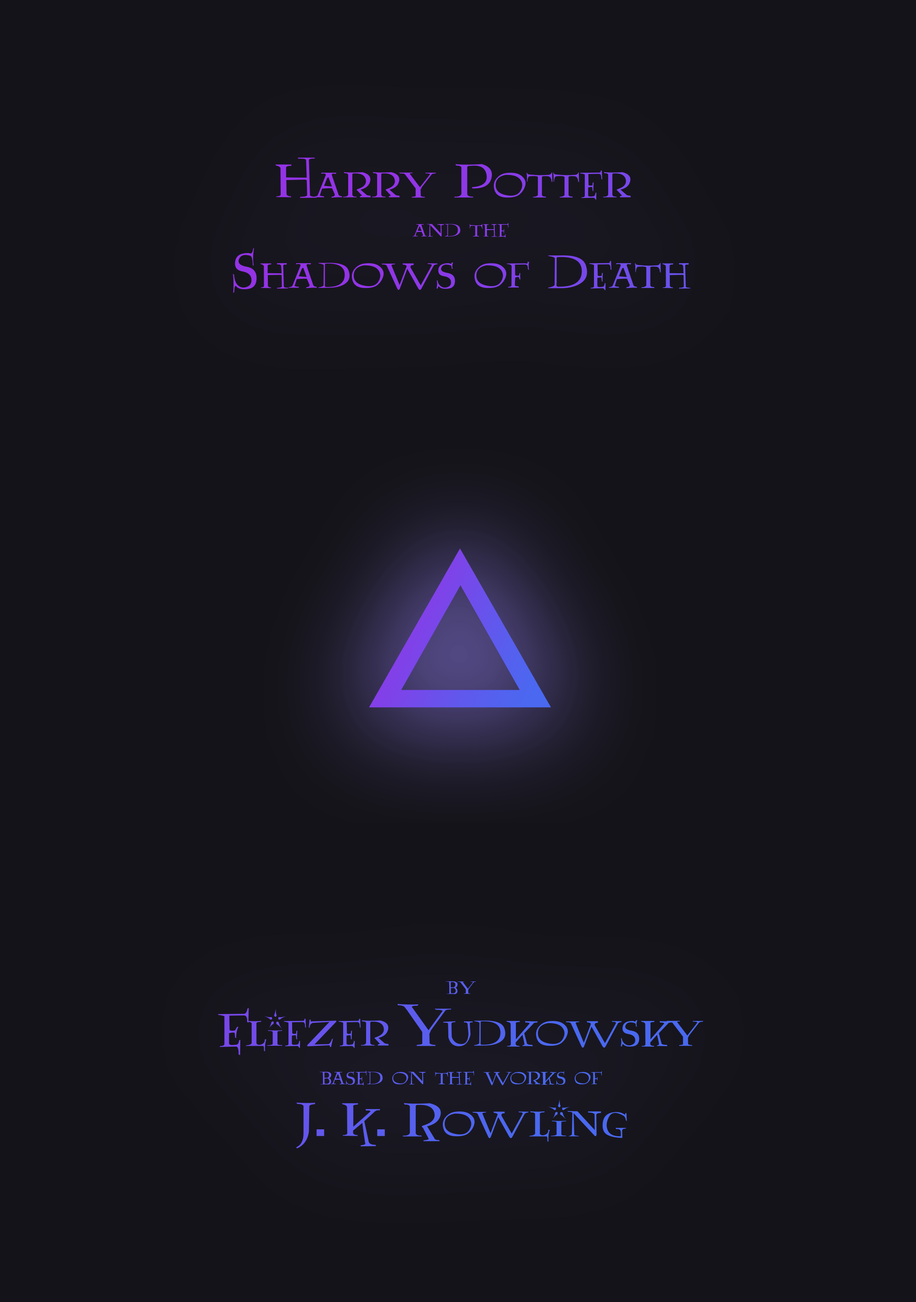
<style>
.page{position:relative;width:916px;height:1302px;background:#141319}
.page>*{position:absolute;margin:0}
.t1{font:55.1px/51.5px "Lumos";color:#8d38e7}
.t2{font:27.6px/38.9px "Lumos";color:#8d38e7}
.t3{font:27.6px/38.9px "Lumos";color:#5461ee}
.t4{font:27.6px/706.4px "Lumos";color:#5461ee}
.t5{font:55.1px/51.5px "Lumos";color:#5461ee}
</style>
<div class="page">
<p class="t1" style="left:233px;top:158px;width:457px;height:135px;text-align:center">Harry Potter <br><span class="t2">and the<br></span>Shadows of Death</p>
<p class="t3" style="left:218px;top:981px;width:485px;height:168px;text-align:center"><span class="t4">by<br></span><span class="t5">Eliezer Yudkowsky<br></span>based on the works of<br><span class="t5">J. K. Rowling</span></p>
</div>
